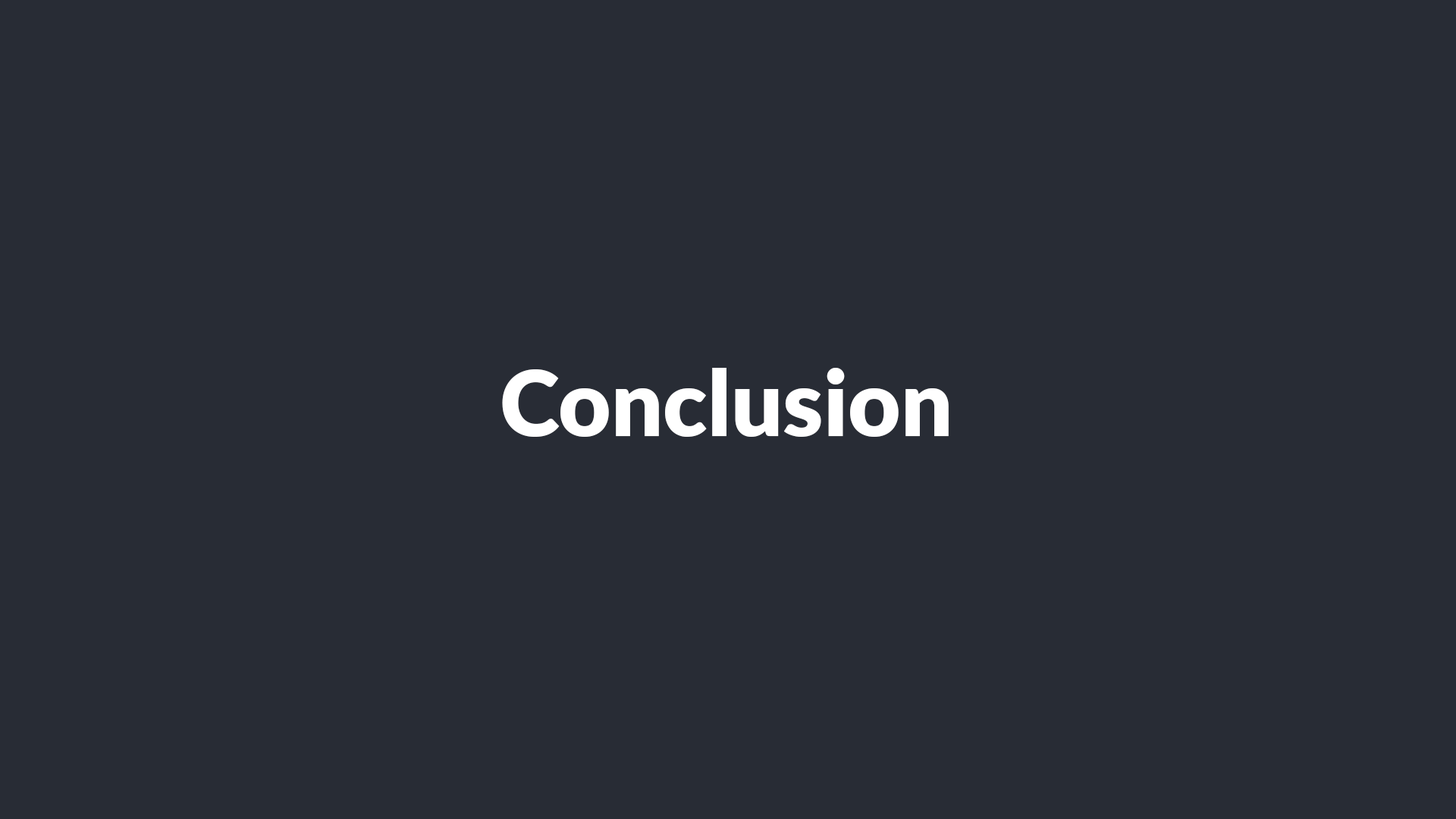
<style>
.page{position:relative;width:1456px;height:819px;background:#282c35}
.page>*{position:absolute;margin:0}
.t1{font:91px "Lato-ExtraBold";color:#ffffff}
</style>
<div class="page">
<p class="t1" style="left:502px;top:368px;width:447px;height:69px">Conclusion</p>
</div>
